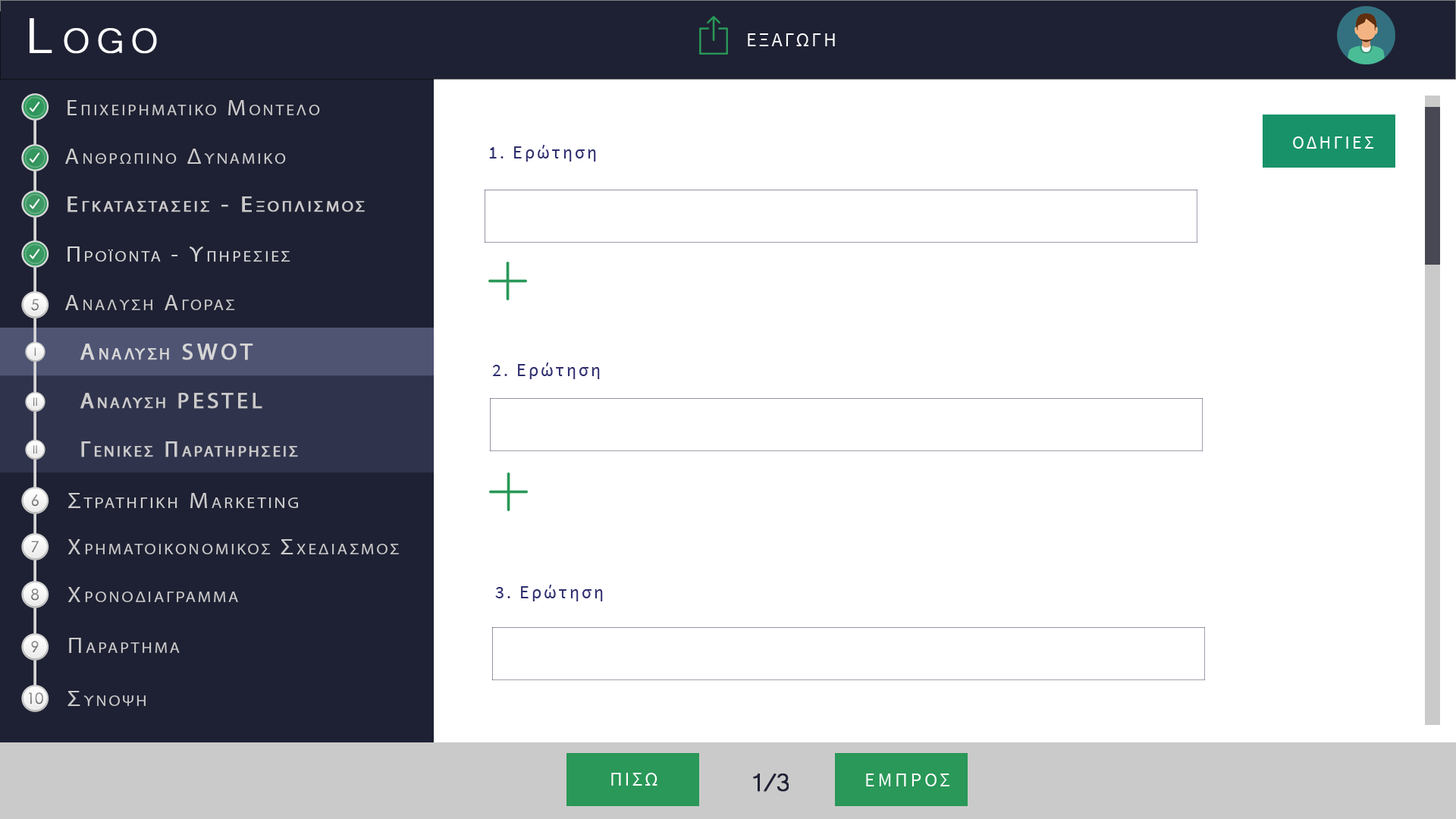
<style>
.page{position:relative;width:1456px;height:819px;background:#ffffff}
.page>*{position:absolute;margin:0}
.t1{font:63.7px "Microsoft-Yi-Baiti";letter-spacing:0.13em;color:#ffffff;font-variant:small-caps;font-weight:bold}
.t2{font:20px "SourceSansPro-Regular";letter-spacing:0.1em;color:#fefefe;text-transform:uppercase}
.t3{font:21.7px "MyriadPro-Regular";letter-spacing:0.13em;color:#cbcaca;font-variant:small-caps;scale:1.09 1}
.t4{font:23.4px "Microsoft-Yi-Baiti";letter-spacing:0.13em;color:#cbcaca;font-variant:small-caps;font-weight:bold}
.t5{font:18.2px "SourceSansPro-Regular";letter-spacing:0.13em;color:#ffffff;text-transform:uppercase}
.t6{font:18.2px "SourceSansPro-Regular";letter-spacing:0.13em;color:#2f2f70}
.t7{font:18.2px "SourceSansPro-Regular";letter-spacing:0.13em;color:#2f2f70;text-transform:uppercase}
.t8{font:21.7px/91px "MyriadPro-Regular";letter-spacing:0.13em;color:#cbcaca;font-variant:small-caps;font-weight:bold;scale:1.09 1}
.t9{font:23.4px/91px "Microsoft-Yi-Baiti";letter-spacing:0.13em;color:#cbcaca;font-variant:small-caps;font-weight:bold}
.t10{font:21.7px "MyriadPro-Regular";letter-spacing:0.13em;color:#d6d6d6;font-variant:small-caps;scale:1.09 1}
.t11{font:23.4px "Microsoft-Yi-Baiti";letter-spacing:0.13em;color:#d6d6d6;font-variant:small-caps;font-weight:bold}
.t12{font:15.3px "CenturyGothic";color:#898989}
.t13{font:11.2px "CenturyGothic";color:#808080}
.t14{font:23.4px "MyriadPro-Regular";letter-spacing:0.13em;color:#d6d6d6;font-variant:small-caps;font-weight:bold}
.t15{font:11.2px "CenturyGothic";color:#828282}
.t16{font:22.3px "MyriadPro-Regular";letter-spacing:0.13em;color:#cbcaca;font-variant:small-caps;font-weight:bold}
.t17{font:15.3px "CenturyGothic";color:#838383}
.t18{font:22.2px "MyriadPro-Regular";letter-spacing:0.13em;color:#cbcaca;font-variant:small-caps;scale:1.09 1}
.t19{font:25.5px "Microsoft-Yi-Baiti";letter-spacing:0.13em;color:#cbcaca;font-variant:small-caps;font-weight:bold}
.t20{font:15.3px "CenturyGothic";color:#888888}
.t21{font:15.3px "CenturyGothic";color:#8b8b8b}
.t22{font:23.7px "Microsoft-Yi-Baiti";letter-spacing:0.13em;color:#cbcaca;font-variant:small-caps;scale:1.09 1}
.t23{font:15.3px "CenturyGothic";color:#878787}
.t24{font:32.8px "Microsoft-Yi-Baiti";letter-spacing:-0.1em;color:#1e2133;font-weight:bold}
.t25{font:20px "SourceSansPro-Regular";letter-spacing:0.13em;color:#fefefe;text-transform:uppercase}
</style>
<div class="page">
<p class="t1" style="left:30px;top:18px;width:127px;height:36px">Logo</p>
<p class="t2" style="left:748px;top:33px;width:87px;height:13px">εξαγωγη</p>
<p class="t3" style="left:67px;top:100px;width:253px;height:15px"><span class="t4">   </span>Επιχειρηματικο Μοντελο</p>
<p class="t5" style="left:1293px;top:136px;width:81px;height:13px">Οδηγιεσ</p>
<p class="t3" style="left:65px;top:149px;width:221px;height:15px"><span class="t4">   </span>Ανθρωπινο Δυναμικο</p>
<p class="t6" style="left:489px;top:145px;width:107px;height:17px"><span class="t7">1. </span>Ερώτηση</p>
<p class="t8" style="left:67px;top:196px;width:298px;height:16px"><span class="t9">   </span>Εγκαταστασεισ - Εξοπλισμοσ<br><br><span class="t9">Equipment</span></p>
<p class="t10" style="left:67px;top:246px;width:223px;height:16px"><span class="t11">   </span>Προϊοντα - Υπηρεσιεσ</p>
<p class="t12" style="left:31px;top:299px;width:8px;height:12px">5</p>
<p class="t3" style="left:65px;top:295px;width:170px;height:15px"><span class="t4">   </span>Αναλυση Αγορασ</p>
<p class="t13" style="left:34px;top:347px;width:2px;height:9px">I</p>
<p class="t14" style="left:80px;top:344px;width:173px;height:16px">Αναλυση SWOT</p>
<p class="t6" style="left:492px;top:362px;width:108px;height:17px"><span class="t7">2. </span>Ερώτηση</p>
<p class="t15" style="left:33px;top:397px;width:4px;height:9px">II</p>
<p class="t16" style="left:80px;top:393px;width:182px;height:16px">Αναλυση PESTEL</p>
<p class="t15" style="left:33px;top:445px;width:4px;height:9px">II</p>
<p class="t16" style="left:81px;top:441px;width:217px;height:16px">Γενικεσ Παρατηρησεισ</p>
<p class="t17" style="left:31px;top:494px;width:8px;height:13px">6</p>
<p class="t18" style="left:68px;top:493px;width:230px;height:15px"><span class="t19">   </span>Στρατηγικη Marketing</p>
<p class="t20" style="left:31px;top:541px;width:8px;height:12px">7</p>
<p class="t3" style="left:67px;top:539px;width:332px;height:15px"><span class="t19">   </span>Χρηματοικονομικοσ Σχεδιασμοσ</p>
<p class="t21" style="left:31px;top:588px;width:8px;height:13px">8</p>
<p class="t3" style="left:67px;top:587px;width:171px;height:15px"><span class="t19">   </span>Χρονοδιαγραμμα</p>
<p class="t6" style="left:495px;top:585px;width:108px;height:16px"><span class="t7">3. </span>Ερώτηση</p>
<p class="t17" style="left:31px;top:641px;width:8px;height:12px">9</p>
<p class="t3" style="left:69px;top:638px;width:111px;height:15px"><span class="t22">   </span>Παραρτημα</p>
<p class="t23" style="left:28px;top:692px;width:15px;height:12px">10</p>
<p class="t3" style="left:67px;top:691px;width:79px;height:15px"><span class="t22">   </span>Συνοψη</p>
<p class="t2" style="left:611px;top:773px;width:46px;height:13px">Πισω</p>
<p class="t24" style="left:753px;top:773px;width:36px;height:19px">1/3</p>
<p class="t25" style="left:866px;top:773px;width:83px;height:13px">εμπροσ</p>
</div>
